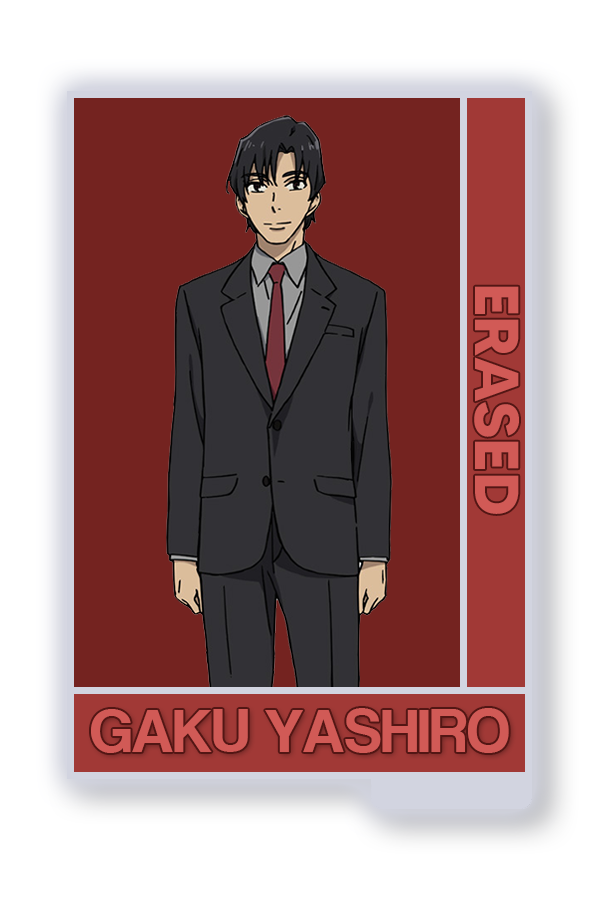
<style>
.page{position:relative;width:600px;height:900px;background:#742320}
.page>*{position:absolute;margin:0}
.t1{font:61.9px "MADETOMMY-Bold";color:#d15a56}
.t2{font:64.1px "CoolveticaRg-Regular";color:#d15a56}
</style>
<div class="page">
<p class="t1" style="left:474px;top:286px;width:45px;height:228px;rotate:90deg">ERASED</p>
<p class="t2" style="left:91px;top:708px;width:418px;height:45px">GAKU YASHIRO</p>
</div>
